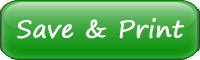
<style>
.page{position:relative;width:200px;height:60px}
.page>*{position:absolute;margin:0}
.t1{font:24px "SegoePrint";color:#ffffff;font-weight:bold}
</style>
<div class="page">
<p class="t1" style="left:17px;top:18px;width:167px;height:21px">Save &amp; Print</p>
</div>
